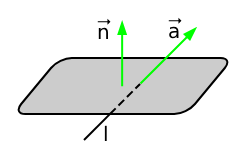
<style>
.page{position:relative;width:240px;height:159px;background:#ffffff}
.page>*{position:absolute;margin:0}
.t1{font:20px "DejaVuSans";color:#000000}
</style>
<div class="page">
<p class="t1" style="left:98px;top:27px;width:10px;height:12px">n</p>
<p class="t1" style="left:169px;top:26px;width:10px;height:13px">a</p>
<p class="t1" style="left:104px;top:125px;width:3px;height:16px">l</p>
</div>
